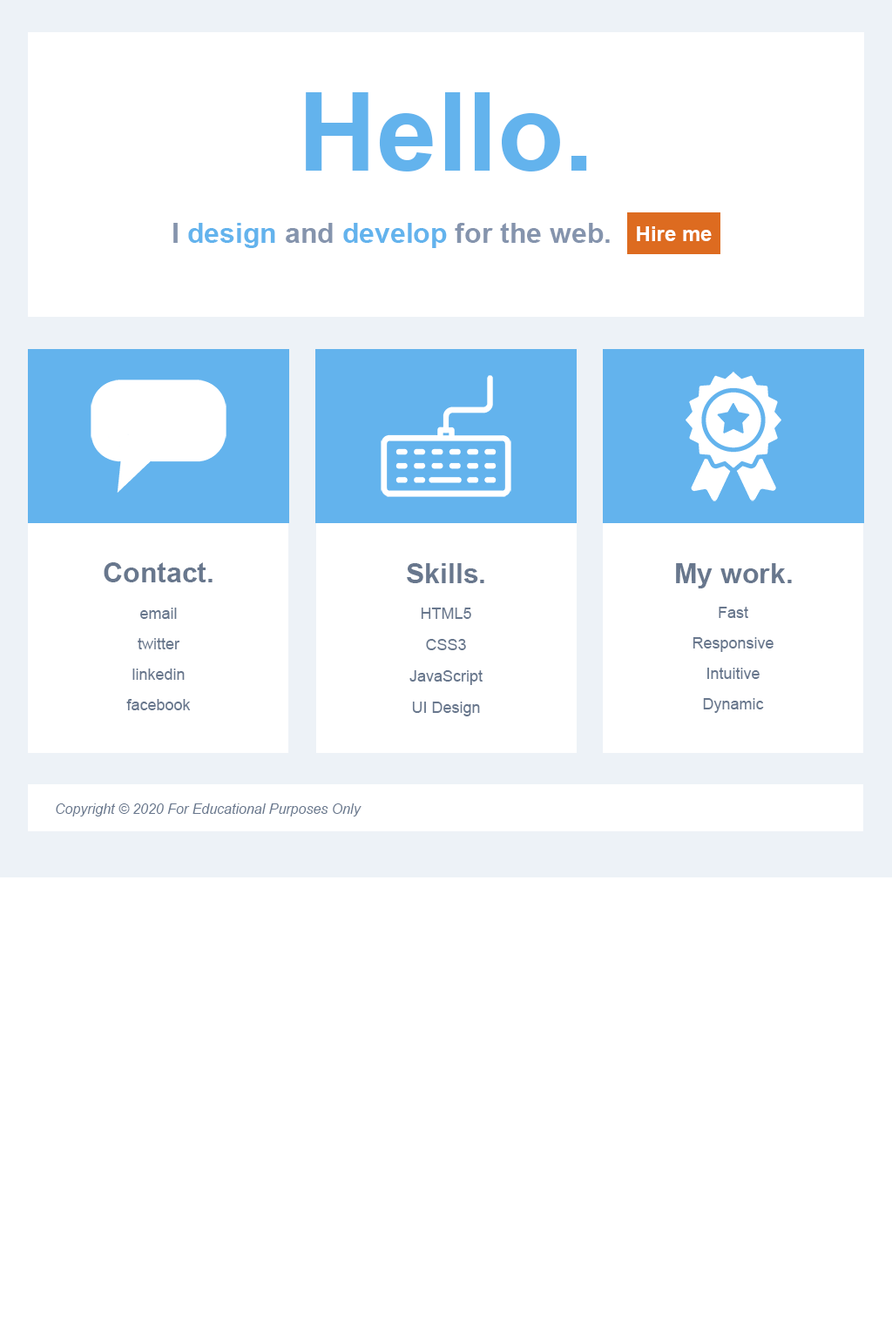
<style>
.page{position:relative;width:892px;height:1337px;background:#ffffff}
.page>*{position:absolute;margin:0}
.t1{font:108.8px "Arial-BoldMT";color:#63b3ed}
.t2{font:27.9px "Arial-BoldMT";color:#8594ad}
.t3{font:27.9px "Arial-BoldMT";color:#63b3ed}
.t4{font:20.9px "Arial-BoldMT";color:#ffffff}
.t5{font:27.9px "Arial-BoldMT";color:#68778d}
.t6{font:15.7px/30.5px "ArialMT";color:#68778d}
.t7{font:15.7px/31.3px "ArialMT";color:#68778d}
.t8{font:13.9px "Arial-ItalicMT";color:#68778d}
</style>
<div class="page">
<p class="t1" style="left:306px;top:92px;width:281px;height:80px">Hello.</p>
<p class="t2" style="left:173px;top:223px;width:436px;height:25px">I <span class="t3">design </span>and <span class="t3">develop </span>for the web.</p>
<p class="t4" style="left:636px;top:226px;width:75px;height:15px">Hire me</p>
<p class="t5" style="left:104px;top:562px;width:108px;height:21px">Contact.</p>
<p class="t5" style="left:407px;top:563px;width:77px;height:20px">Skills.</p>
<p class="t5" style="left:676px;top:563px;width:115px;height:26px">My work.</p>
<p class="t6" style="left:126px;top:608px;width:65px;height:102px;text-align:center">email<br>twitter<br>linkedin<br>facebook</p>
<p class="t7" style="left:409px;top:608px;width:73px;height:109px;text-align:center">HTML5<br>CSS3<br>JavaScript<br>UI Design</p>
<p class="t6" style="left:692px;top:607px;width:81px;height:106px;text-align:center">Fast<br>Responsive<br>Intuitive<br>Dynamic</p>
<p class="t8" style="left:56px;top:804px;width:305px;height:13px">Copyright © 2020 For Educational Purposes Only</p>
</div>
